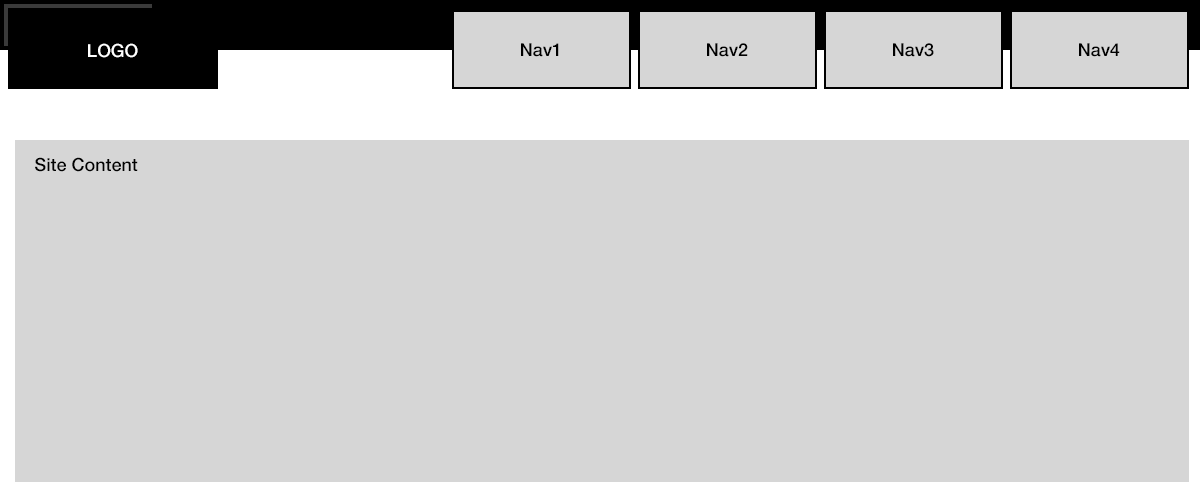
<style>
.page{position:relative;width:1200px;height:500px;background:#d6d6d6}
.page>*{position:absolute;margin:0}
.t1{font:18px "HelveticaNeue-Medium";color:#ffffff}
.t2{font:18px "HelveticaNeue-Medium";color:#000000}
</style>
<div class="page">
<p class="t1" style="left:88px;top:43px;width:50px;height:15px">LOGO</p>
<p class="t2" style="left:521px;top:43px;width:38px;height:14px">Nav1</p>
<p class="t2" style="left:707px;top:43px;width:41px;height:14px">Nav2</p>
<p class="t2" style="left:893px;top:43px;width:41px;height:14px">Nav3</p>
<p class="t2" style="left:1079px;top:43px;width:41px;height:14px">Nav4</p>
<p class="t2" style="left:35px;top:157px;width:103px;height:15px">Site Content</p>
</div>
